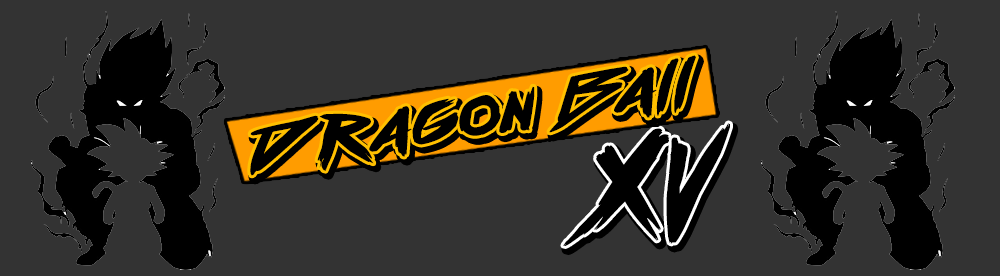
<style>
.page{position:relative;width:1000px;height:276px;background:#333333}
.page>*{position:absolute;margin:0}
.t1{font:53.2px "outrunfuture";letter-spacing:0.025em;color:#000000;scale:1.25 1}
.t2{font:85.4px "outrunfuture";letter-spacing:0.025em;color:#000000}
</style>
<div class="page">
<p class="t1" style="left:250px;top:55px;width:446px;height:121px;rotate:-9deg">Dragon Ball</p>
<p class="t2" style="left:563px;top:109px;width:167px;height:137px">XV</p>
</div>
